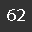
<style>
.page{position:relative;width:32px;height:32px;background:#333333}
.page>*{position:absolute;margin:0}
.t1{font:17.8px "MyriadPro-Regular";color:#ffffff;scale:1.12 1}
</style>
<div class="page">
<p class="t1" style="left:7px;top:9px;width:18px;height:12px">62</p>
</div>
